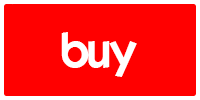
<style>
.page{position:relative;width:200px;height:100px;background:#ff0000}
.page>*{position:absolute;margin:0}
.t1{font:48px "ELEGANCE";color:#ffffff}
</style>
<div class="page">
<p class="t1" style="left:61px;top:32px;width:76px;height:45px">buy</p>
</div>
